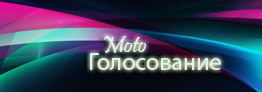
<style>
.page{position:relative;width:262px;height:92px}
.page>*{position:absolute;margin:0}
.t1{font:24px "Pristina-Regular";color:#d9f8f5}
.t2{font:24px "MyriadPro-Regular";color:#d9f8f5}
</style>
<div class="page">
<p class="t1" style="left:103px;top:36px;width:44px;height:17px">Moto</p>
<p class="t2" style="left:90px;top:53px;width:131px;height:17px">Голосование</p>
</div>
